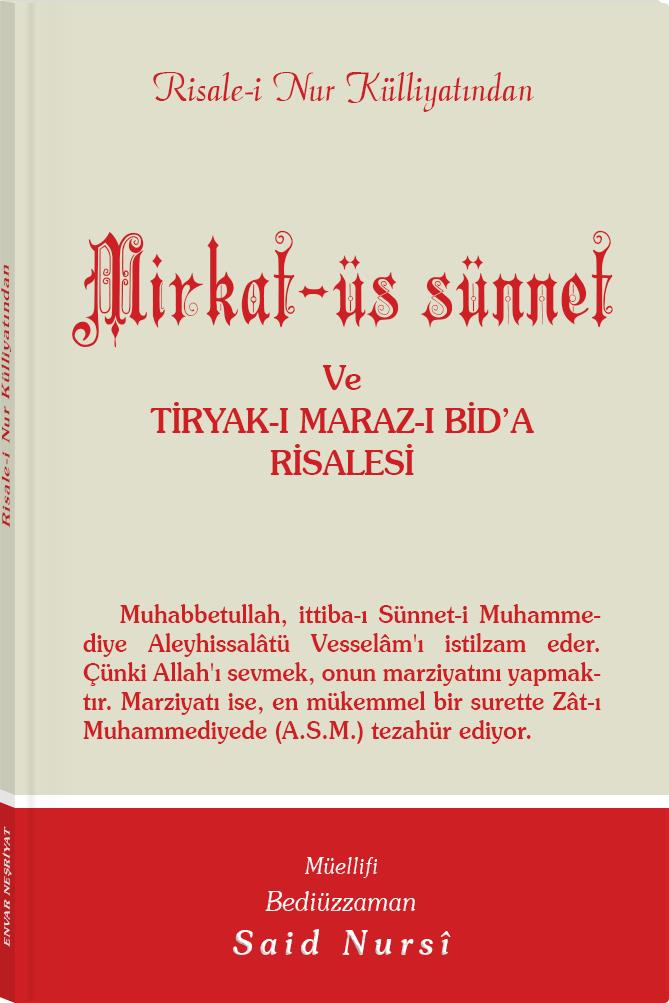
<style>
.page{position:relative;width:669px;height:1003px;background:#dfdfcb}
.page>*{position:absolute;margin:0}
.t1{font:45.3px "Barla © 072 Aria ScriptScriptSSi";color:#ce2024;scale:0.94 1}
.t2{font:117.7px "Barla © 001 Liva Nur";letter-spacing:-0.001em;color:#ce2024;scale:0.93 1}
.t3{font:11.4px "Souvenir-Medium";letter-spacing:0.08em;color:#ce2024;scale:1.65 1}
.t4{font:34.2px/42.9px "Souvenir-Medium";color:#ce2024;scale:0.92 1}
.t5{font:25.3px/29px "Souvenir-Medium";color:#ce2024;scale:0.92 1}
.t6{font:8.3px "Souvenir-Medium";letter-spacing:0.08em;color:#e5e5e5;scale:1.43 1}
.t7{font:27.1px/37.8px "Souvenir-LightItalic";color:#ffffff;scale:0.92 1}
.t8{font:22.8px/39.8px "Souvenir-LightItalic";color:#ffffff;scale:0.92 1}
.t9{font:33.9px/43.8px "Souvenir-MediumItalic";letter-spacing:0.2em;color:#ffffff;scale:0.92 1}
</style>
<div class="page">
<p class="t1" style="left:153px;top:72px;width:381px;height:40px">Risale-i Nur Külliyatından</p>
<p class="t2" style="left:72px;top:230px;width:541px;height:118px">Mirkat-üs sünnet</p>
<p class="t3" style="left:1px;top:265px;width:10px;height:263px;rotate:-90deg">Risale-i Nur Külliyatından</p>
<p class="t4" style="left:150px;top:365px;width:384px;height:110px;text-align:center">Ve<br>TİRYAK-I MARAZ-I BİD’A<br>RİSALESİ</p>
<p class="t5" style="left:83px;top:604px;width:518px;height:140px;text-align:justify">Muhabbetullah, ittiba-ı Sünnet-i Muhammediye Aleyhissalâtü Vesselâm'ı istilzam eder. Çünki Allah'ı sevmek, onun marziyatını yapmaktır. Marziyatı ise, en mükemmel bir surette Zât-ı Muhammediyede (A.S.M.) tezahür ediyor.</p>
<p class="t6" style="left:2px;top:826px;width:10px;height:121px;rotate:-90deg">ENVAR NEŞRİYAT</p>
<p class="t7" style="left:233px;top:857px;width:218px;height:98px;text-align:center"><span class="t8">Müellifi<br></span>Bediüzzaman<br><span class="t9">Said Nursî</span></p>
</div>
